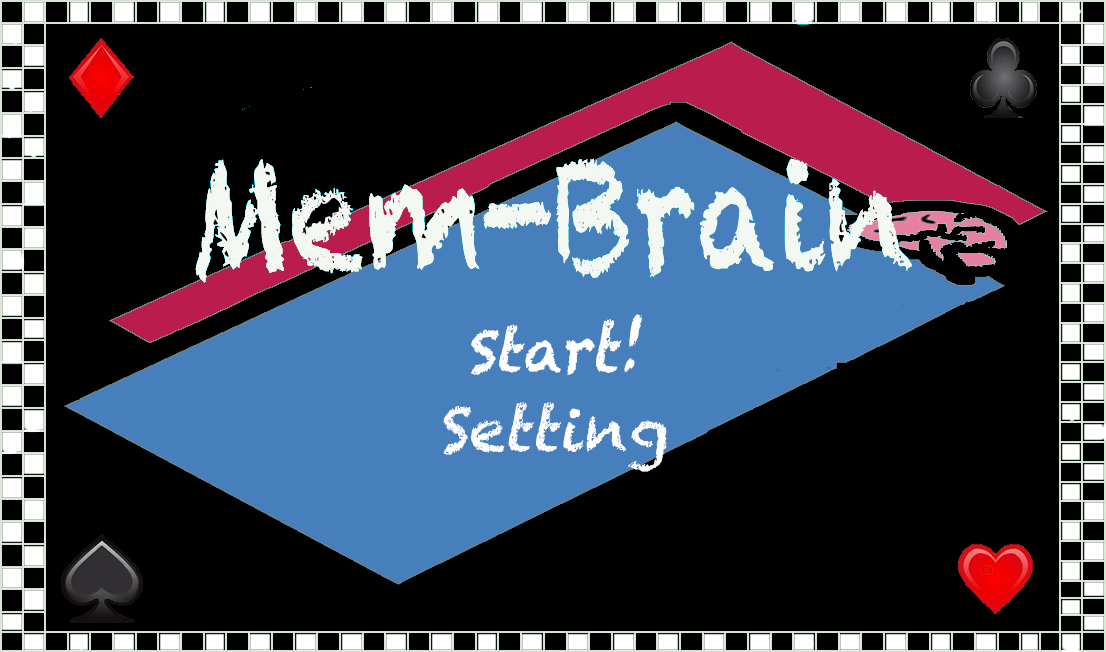
<style>
.page{position:relative;width:1106px;height:652px;background:#000000}
.page>*{position:absolute;margin:0}
.t1{font:60px "Chalkduster";color:#ffffff;font-style:italic}
</style>
<div class="page">
<p class="t1" style="left:471px;top:314px;width:171px;height:62px">Start!</p>
<p class="t1" style="left:443px;top:402px;width:224px;height:70px">Setting</p>
</div>
